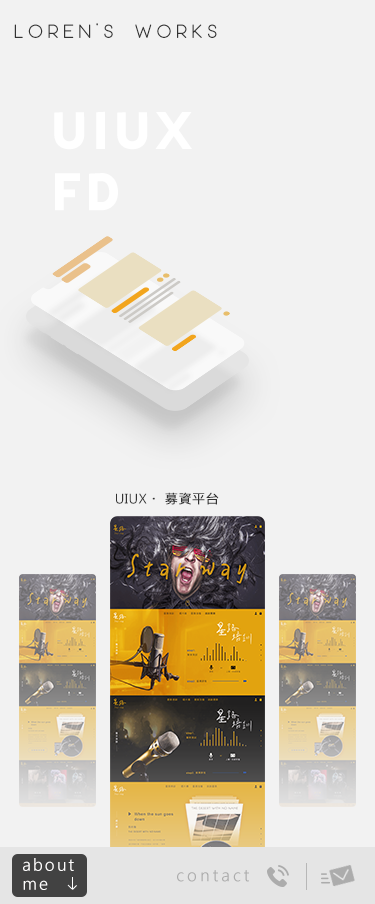
<style>
.page{position:relative;width:375px;height:904px;background:#f2f2f2}
.page>*{position:absolute;margin:0}
.t1{font:19.2px "Moon2.0-Regular";letter-spacing:0.26em;color:#333333}
.t2{font:58px/61.1px "Affogato-Bold";letter-spacing:0.05em;color:#ffffff;scale:1.05 1}
.t3{font:13px "MicrosoftJhengHeiRegular";letter-spacing:0.025em;color:#333333;font-weight:bold}
.t4{font:13px "MicrosoftJhengHeiRegular";letter-spacing:0.025em;color:#333333}
.t5{font:16px/19px "MicrosoftJhengHeiRegular";letter-spacing:0.12em;color:#fffefe}
.t6{font:16px "MicrosoftJhengHeiRegular";letter-spacing:0.18em;color:#acacac}
</style>
<div class="page">
<p class="t1" style="left:14px;top:23px;width:203px;height:15px">LOREN’S WORKS</p>
<p class="t2" style="left:54px;top:111px;width:138px;height:100px">UIUX<br>FD</p>
<p class="t3" style="left:116px;top:492px;width:103px;height:13px"><span class="t4">UIUX</span>・ 募資平台</p>
<p class="t5" style="left:23px;top:858px;width:51px;height:32px">about<br>me</p>
<p class="t6" style="left:177px;top:870px;width:72px;height:12px">contact</p>
</div>
